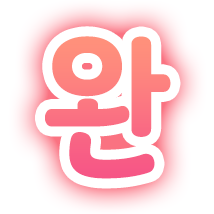
<style>
.page{position:relative;width:214px;height:214px;background:#ffffff}
.page>*{position:absolute;margin:0}
.t1{font:146.7px "Binggrae-Bold";text-transform:uppercase;scale:0.91 1}
</style>
<div class="page">
<p class="t1" style="left:45px;top:36px;width:126px;height:143px">완</p>
</div>
